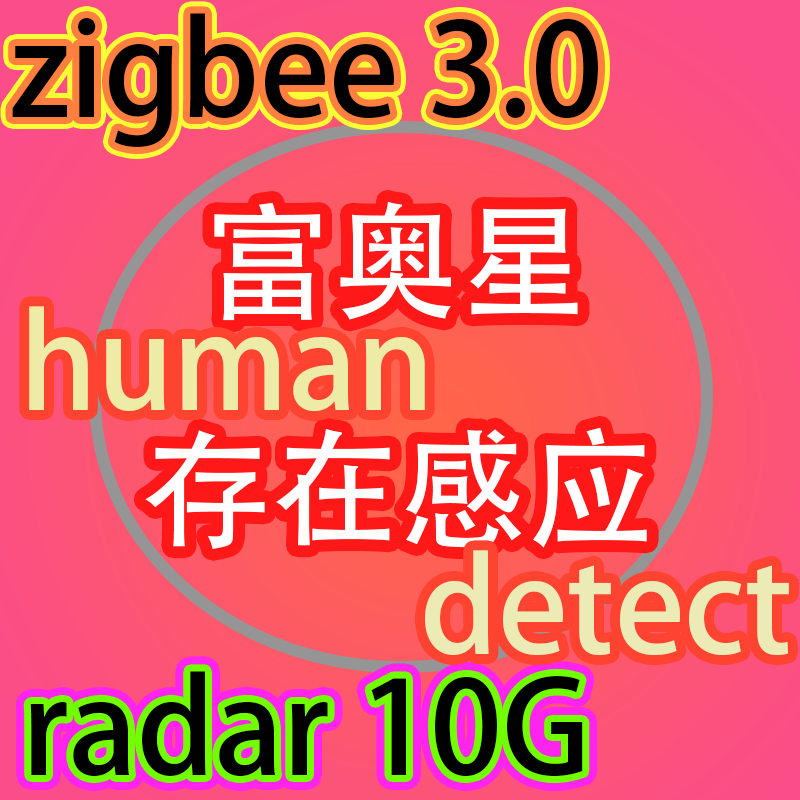
<style>
.page{position:relative;width:800px;height:800px}
.page>*{position:absolute;margin:0}
.t1{font:128px "AdobeHeitiStd-Regular";color:#000000}
.t2{font:128px "AdobeHeitiStd-Regular";color:#ffffff}
.t3{font:128px "AdobeHeitiStd-Regular";color:#edeba6}
.t4{font:128px "AdobeHeitiStd-Regular";color:#ecebb6}
</style>
<div class="page">
<p class="t1" style="left:12px;top:13px;width:586px;height:134px">zigbee 3.0</p>
<p class="t2" style="left:214px;top:201px;width:364px;height:120px">富奥星</p>
<p class="t3" style="left:29px;top:306px;width:396px;height:106px">human</p>
<p class="t2" style="left:145px;top:427px;width:502px;height:122px">存在感应</p>
<p class="t4" style="left:425px;top:550px;width:364px;height:106px">detect</p>
<p class="t1" style="left:30px;top:671px;width:553px;height:106px">radar 10G</p>
</div>
